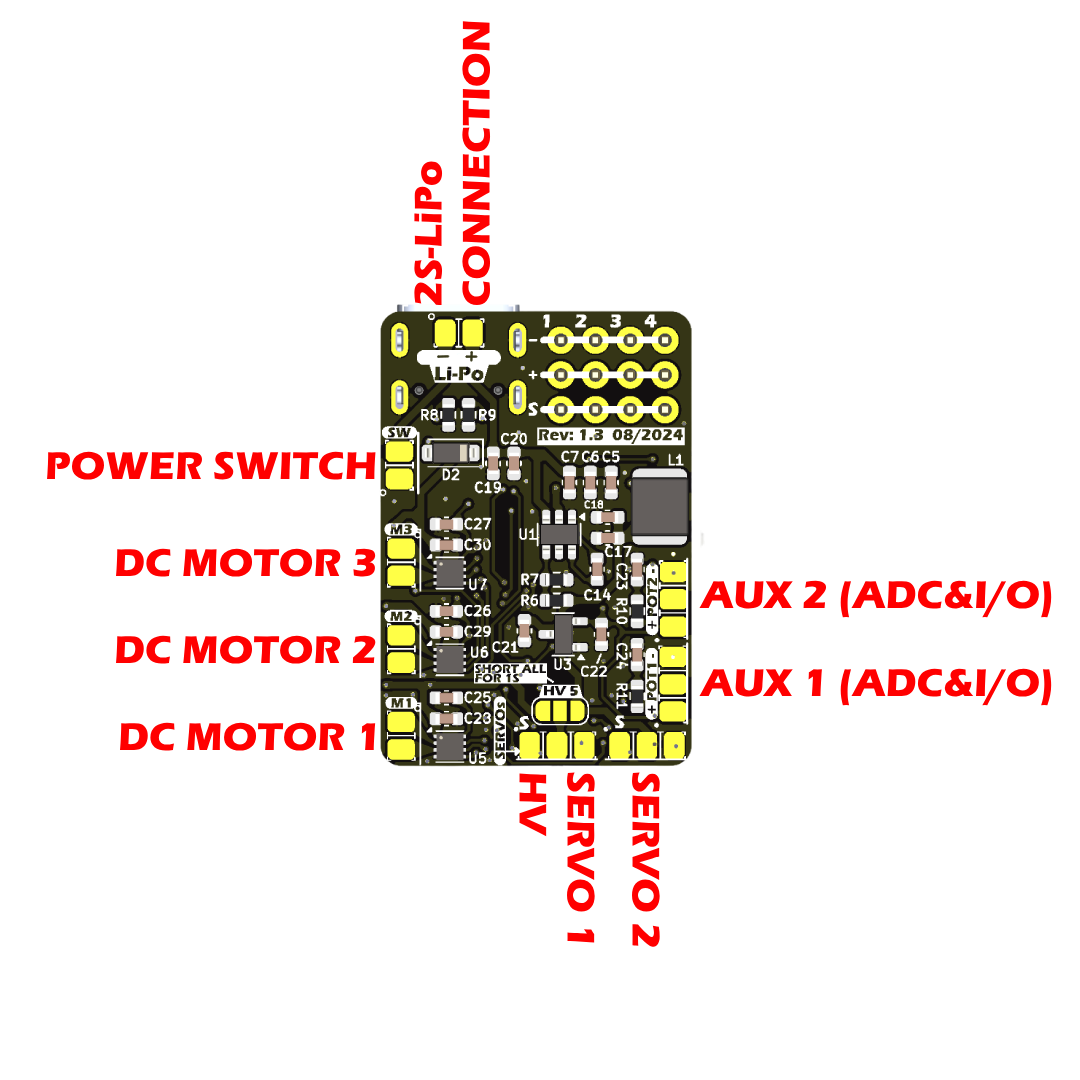
<style>
.page{position:relative;width:1080px;height:1080px;background:#ffffff}
.page>*{position:absolute;margin:0}
.t1{font:40px "ErasITC-Bold";color:#ff0000}
</style>
<div class="page">
<p class="t1" style="left:414px;top:21px;width:77px;height:285px;rotate:-90deg">2S-LiPo<br>CONNECTION</p>
<p class="t1" style="left:47px;top:451px;width:329px;height:29px">POWER SWITCH</p>
<p class="t1" style="left:115px;top:548px;width:261px;height:29px">DC MOTOR 3</p>
<p class="t1" style="left:699px;top:580px;width:353px;height:38px">AUX 2 (ADC&amp;I/O)</p>
<p class="t1" style="left:115px;top:635px;width:261px;height:29px">DC MOTOR 2</p>
<p class="t1" style="left:699px;top:668px;width:353px;height:38px">AUX 1 (ADC&amp;I/O)</p>
<p class="t1" style="left:119px;top:722px;width:257px;height:29px">DC MOTOR 1</p>
<p class="t1" style="left:519px;top:772px;width:76px;height:171px;rotate:90deg">SERVO 1<br>HV</p>
<p class="t1" style="left:632px;top:772px;width:28px;height:175px;rotate:90deg">SERVO 2</p>
</div>
